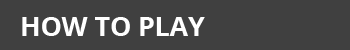
<style>
.page{position:relative;width:350px;height:50px;background:#404040}
.page>*{position:absolute;margin:0}
.t1{font:26.7px "OpenSans-Bold";color:#ffffff}
</style>
<div class="page">
<p class="t1" style="left:22px;top:17px;width:183px;height:19px">HOW TO PLAY</p>
</div>
